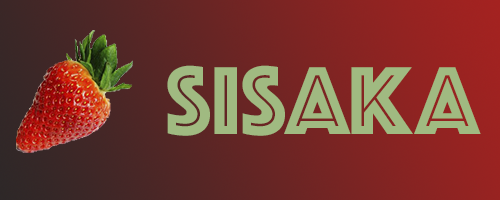
<style>
.page{position:relative;width:500px;height:200px}
.page>*{position:absolute;margin:0}
.t1{font:100px "Phosphate-Inline";color:#a0ba81}
</style>
<div class="page">
<p class="t1" style="left:167px;top:65px;width:314px;height:71px">SISAKA</p>
</div>
